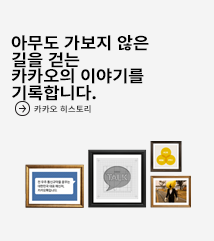
<style>
.page{position:relative;width:214px;height:241px;background:#f4f4f4}
.page>*{position:absolute;margin:0}
.t1{font:16.5px/16.5px "NotoSansKR-Bold";letter-spacing:-0.02em;color:#000000;scale:1.08 1}
.t2{font:8px "NotoSansKR-Bold";letter-spacing:-0.005em;color:#333333;scale:1.08 1}
</style>
<div class="page">
<p class="t1" style="left:11px;top:35px;width:138px;height:66px">아무도 가보지 않은 <br>길을 걷는<br>카카오의 이야기를 <br>기록합니다.</p>
<p class="t2" style="left:34px;top:105px;width:57px;height:8px">카카오 히스토리</p>
</div>
